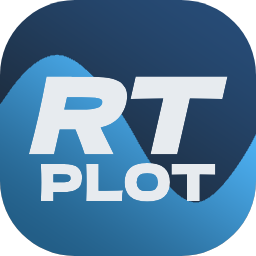
<style>
.page{position:relative;width:256px;height:256px}
.page>*{position:absolute;margin:0}
.t1{font:109.7px "DelaGothicOne-Regular";color:#e7ebef}
.t2{font:50.9px "DelaGothicOne-Regular";color:#e7ebef}
</style>
<div class="page">
<p class="t1" style="left:28px;top:76px;width:200px;height:79px">RT</p>
<p class="t2" style="left:40px;top:163px;width:176px;height:39px">PLOT</p>
</div>
